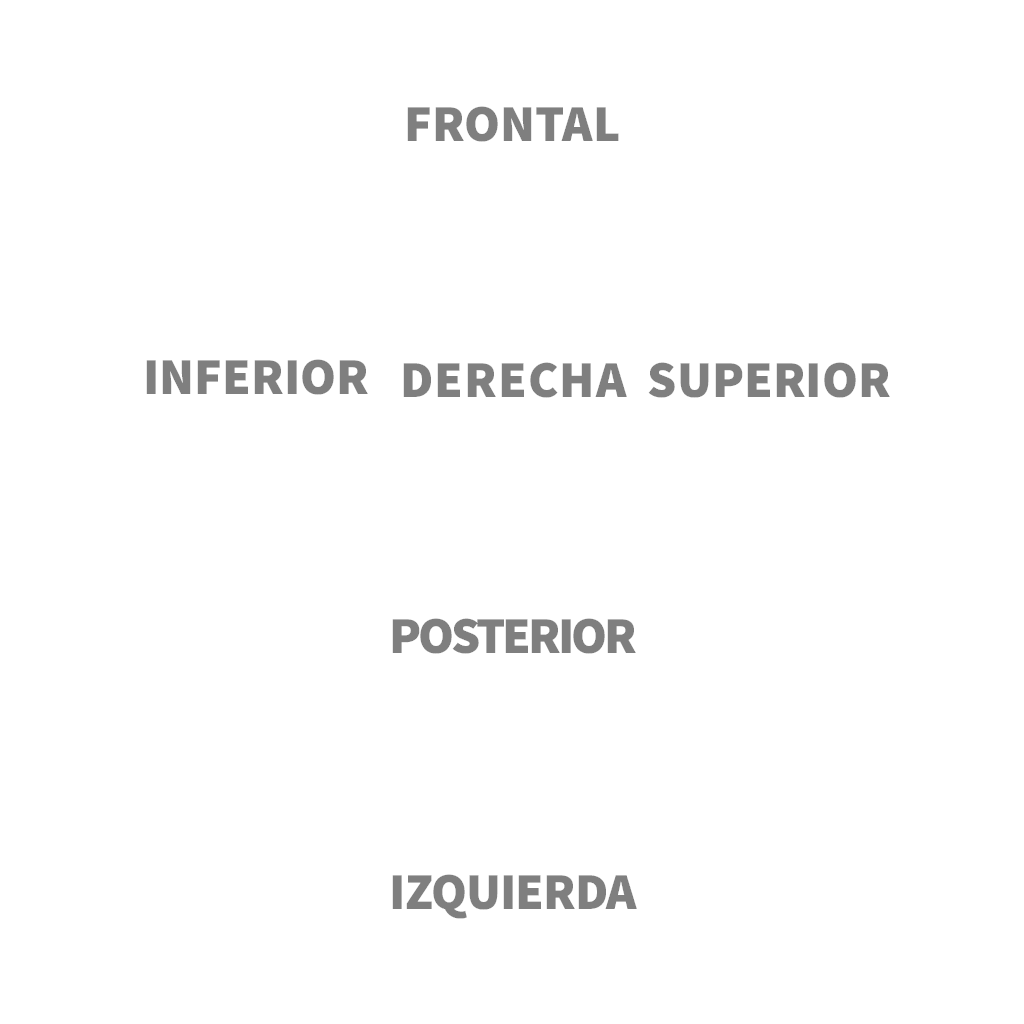
<style>
.page{position:relative;width:1024px;height:1024px;background:#ffffff}
.page>*{position:absolute;margin:0}
.t1{font:52px "SourceSansPro-Black";color:#7f7f7f}
.t2{font:52px "SourceSansPro-Black";letter-spacing:0.02em;color:#7f7f7f}
.t3{font:52px "SourceSansPro-Black";letter-spacing:-0.06em;color:#7f7f7f}
.t4{font:52px "SourceSansPro-Black";letter-spacing:-0.02em;color:#7f7f7f}
</style>
<div class="page">
<p class="t1" style="left:407px;top:106px;width:212px;height:36px">FRONTAL</p>
<p class="t1" style="left:146px;top:359px;width:222px;height:36px">INFERIOR</p>
<p class="t2" style="left:403px;top:362px;width:224px;height:36px">DERECHA</p>
<p class="t1" style="left:648px;top:362px;width:242px;height:36px">SUPERIOR</p>
<p class="t3" style="left:392px;top:618px;width:244px;height:36px">POSTERIOR</p>
<p class="t4" style="left:392px;top:874px;width:245px;height:45px">IZQUIERDA</p>
</div>
